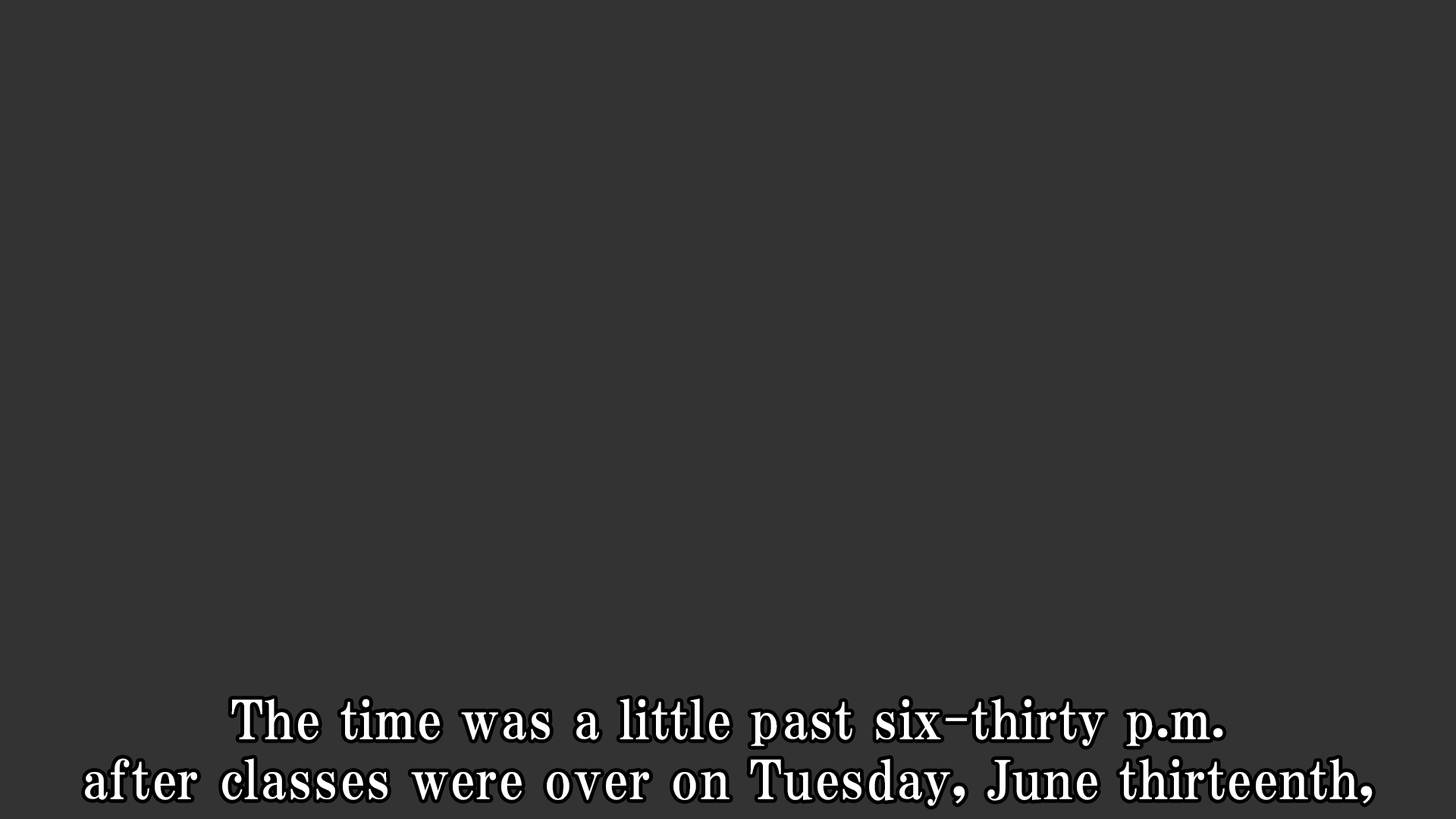
<style>
.page{position:relative;width:1456px;height:819px;background:#333333}
.page>*{position:absolute;margin:0}
.t1{font:53.1px/59.9px "HGPMinchoE";letter-spacing:0.025em;color:#ffffff}
</style>
<div class="page">
<p class="t1" style="left:85px;top:698px;width:1288px;height:108px;text-align:center">The time was a little past six-thirty p.m.<br>after classes were over on Tuesday, June thirteenth,</p>
</div>
